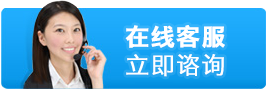
<style>
.page{position:relative;width:268px;height:89px}
.page>*{position:absolute;margin:0}
.t1{font:23.8px "HiraginoSansGB-W6";letter-spacing:0.06em;color:#fdfeff;font-weight:bold}
.t2{font:23.8px "HiraginoSansGB-W3";letter-spacing:0.06em;color:#fdfeff;font-weight:bold}
</style>
<div class="page">
<p class="t1" style="left:125px;top:25px;width:100px;height:52px">在线客服<br><span class="t2">立即谘询</span></p>
</div>
